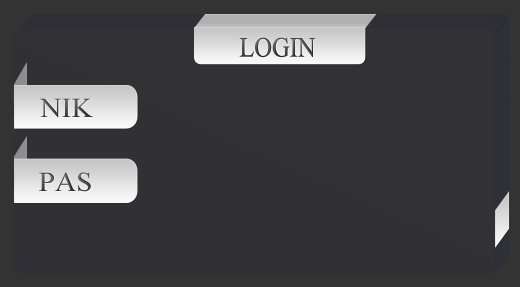
<style>
.page{position:relative;width:520px;height:287px;background:#323235}
.page>*{position:absolute;margin:0}
.t1{font:27.8px "TimesNewRomanPSMT";text-transform:uppercase;scale:0.88 1}
.t2{font:39.7px "TimesNewRomanPSMT";color:#474747;font-variant:small-caps;scale:1.06 1}
.t3{font:39.7px "TimesNewRomanPSMT";color:#4a4a4a;font-variant:small-caps;scale:1.06 1}
</style>
<div class="page">
<p class="t1" style="left:239px;top:37px;width:77px;height:21px">login</p>
<p class="t2" style="left:39px;top:98px;width:54px;height:20px">nik</p>
<p class="t3" style="left:39px;top:172px;width:52px;height:20px">pas</p>
</div>
